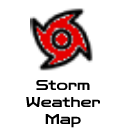
<style>
.page{position:relative;width:128px;height:128px;background:#ffffff}
.page>*{position:absolute;margin:0}
.t1{font:14px "ZenDots-Regular";color:#000000}
</style>
<div class="page">
<p class="t1" style="left:26px;top:79px;width:75px;height:49px;text-align:center">Storm<br>Weather<br>Map</p>
</div>
